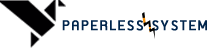
<style>
.page{position:relative;width:211px;height:48px;background:#ffffff}
.page>*{position:absolute;margin:0}
.t1{font:16.1px "supermarket";letter-spacing:0.1em;color:#01254c;text-transform:uppercase;font-weight:bold;scale:0.97 1}
</style>
<div class="page">
<p class="t1" style="left:62px;top:20px;width:145px;height:11px">paperless system</p>
</div>
